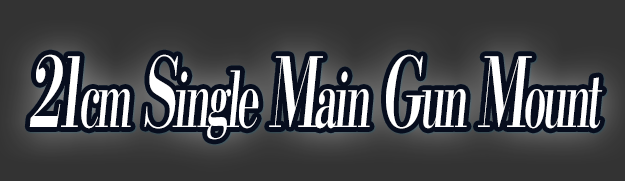
<style>
.page{position:relative;width:625px;height:181px;background:#333333}
.page>*{position:absolute;margin:0}
.t1{font:76.8px "KochoStd-Heavy";letter-spacing:-0.08em;color:#ffffff;font-style:italic;scale:0.54 1}
.t2{font:96px "KochoStd-Heavy";letter-spacing:-0.08em;color:#ffffff;font-style:italic;scale:0.54 1}
</style>
<div class="page">
<p class="t1" style="left:29px;top:54px;width:574px;height:86px"><span class="t2">21</span>cm<span class="t2"> S</span>ingle<span class="t2"> M</span>ain<span class="t2"> G</span>un<span class="t2"> M</span>ount</p>
</div>
